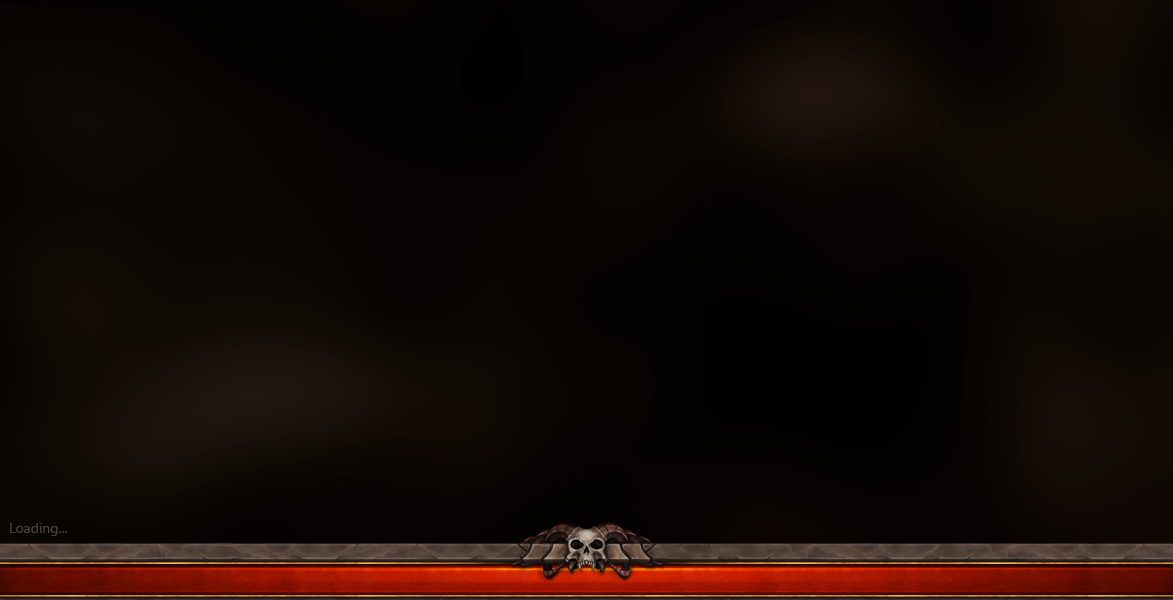
<style>
.page{position:relative;width:1173px;height:600px}
.page>*{position:absolute;margin:0}
.t1{font:14px "KhmerUI";color:#4c3e32}
</style>
<div class="page">
<p class="t1" style="left:10px;top:523px;width:57px;height:13px">Loading...</p>
</div>
